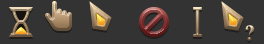
<style>
.page{position:relative;width:264px;height:44px;background:#333333}
.page>*{position:absolute;margin:0}
.t1{font:22px "TimesNewRomanPS-BoldMT";text-transform:uppercase}
</style>
<div class="page">
<p class="t1" style="left:245px;top:25px;width:10px;height:16px">?</p>
</div>
